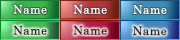
<style>
.page{position:relative;width:180px;height:40px}
.page>*{position:absolute;margin:0}
.t1{font:12px "CenturySchoolbook";letter-spacing:0.025em;color:#ffffff}
.t2{font:12px "CenturySchoolbook";letter-spacing:0.025em;color:#321a02}
</style>
<div class="page">
<p class="t1" style="left:13px;top:4px;width:34px;height:10px">Name</p>
<p class="t1" style="left:73px;top:4px;width:34px;height:10px">Name</p>
<p class="t1" style="left:133px;top:5px;width:34px;height:9px">Name</p>
<p class="t2" style="left:13px;top:25px;width:34px;height:10px">Name</p>
<p class="t2" style="left:73px;top:25px;width:34px;height:10px">Name</p>
<p class="t2" style="left:133px;top:26px;width:34px;height:10px">Name</p>
</div>
